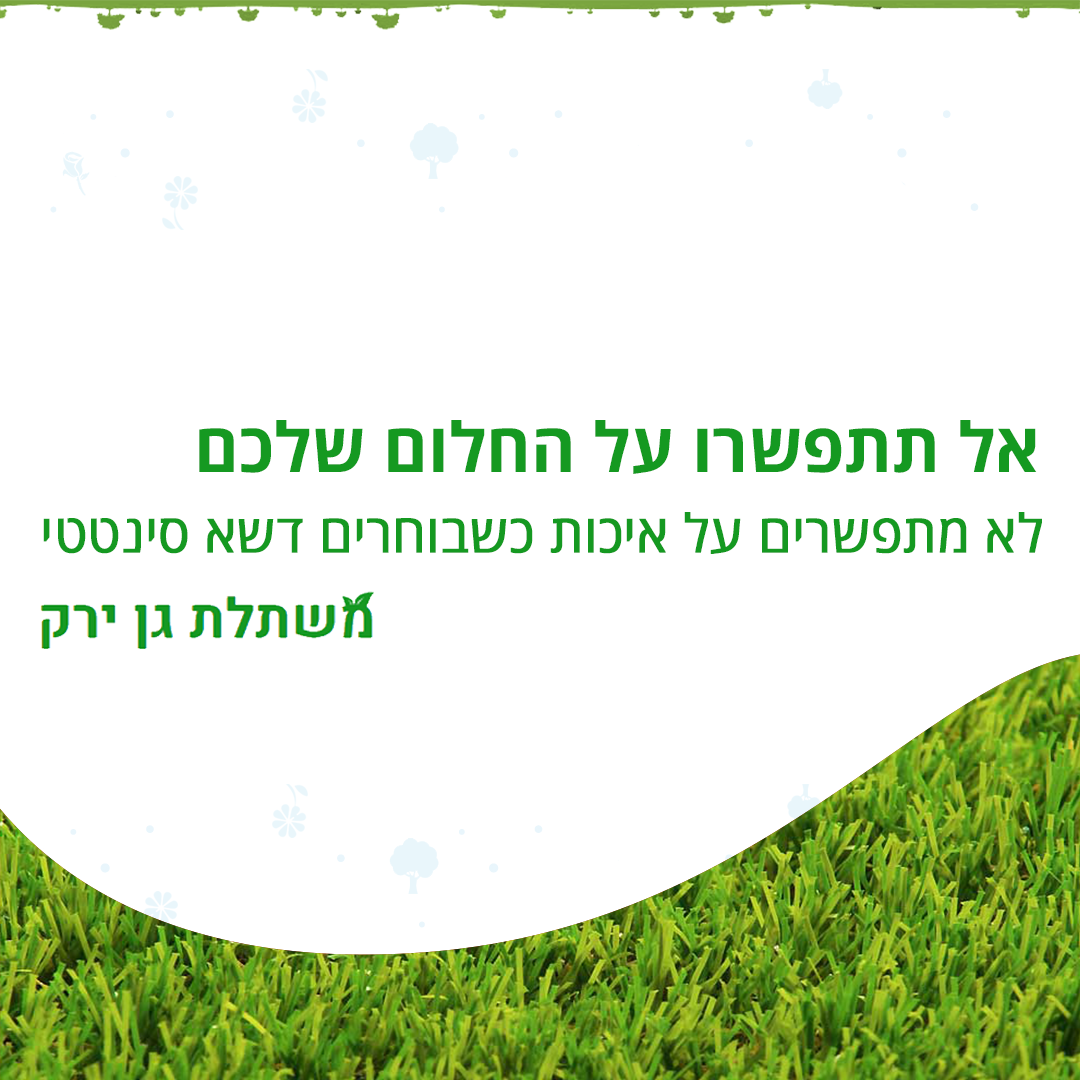
<style>
.page{position:relative;width:1080px;height:1080px;background:#ffffff}
.page>*{position:absolute;margin:0}
.t1{font:68.4px "OpenSansHebrew-Bold";color:#159921}
.t2{font:52.8px "OpenSansHebrew-Regular";color:#159921;font-weight:bold}
</style>
<div class="page">
<p class="t1" style="left:199px;top:420px;width:838px;height:54px">םכלש םולחה לע ורשפתת לא</p>
<p class="t2" style="left:43px;top:512px;width:999px;height:42px">יטטניס אשד םירחובשכ תוכיא לע םירשפתמ אל</p>
</div>
